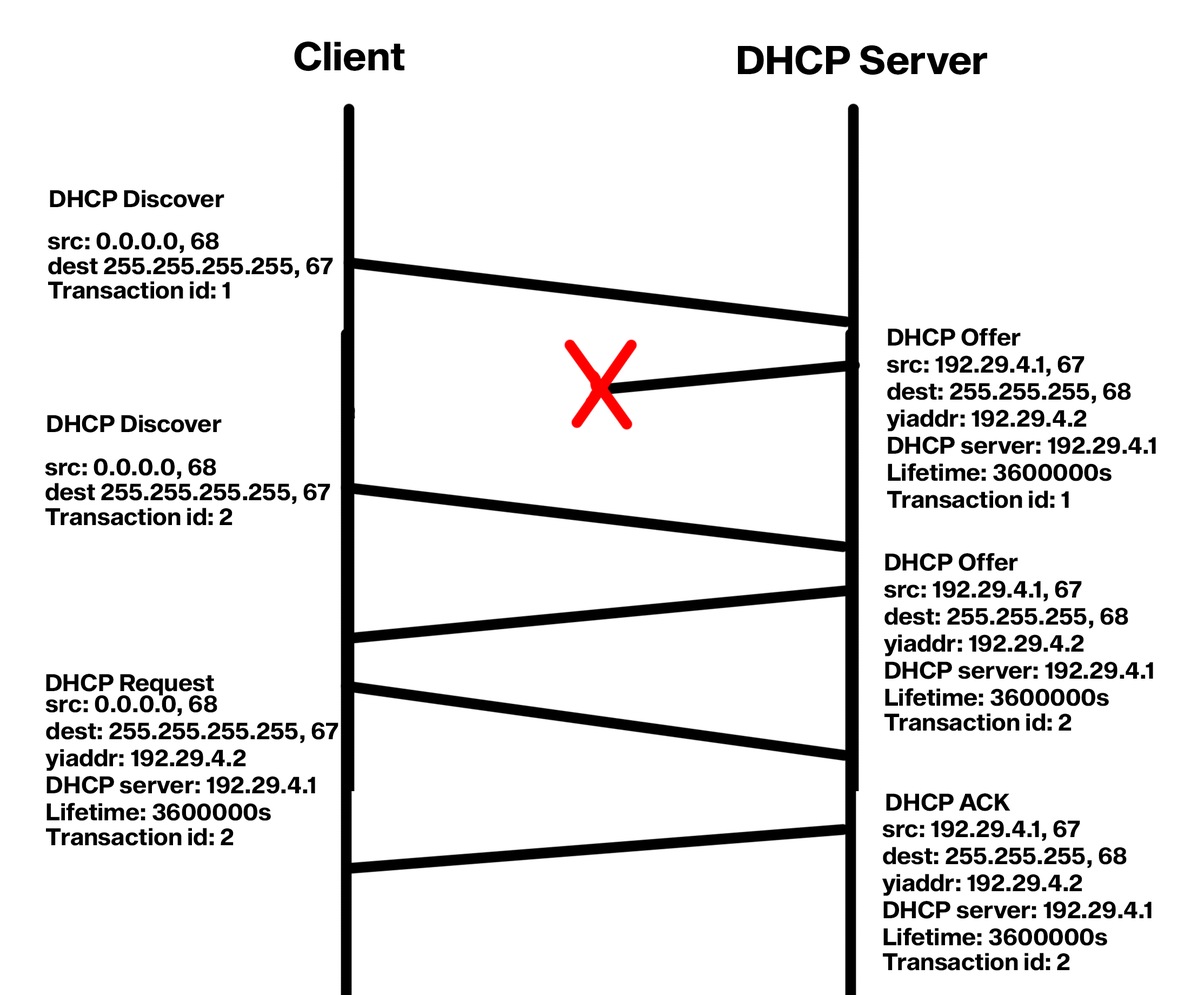
<style>
.page{position:relative;width:1198px;height:995px;background:#ffffff}
.page>*{position:absolute;margin:0}
.t1{font:67.6px "SequelSans-BoldHead";color:#000000}
.t2{font:40.6px "SequelSans-BoldHead";color:#000000}
.t3{font:40.6px/24.8px "SequelSans-BoldHead";color:#000000}
.t4{font:40.6px/27px "SequelSans-BoldHead";color:#000000}
.t5{font:40.6px/22.5px "SequelSans-BoldHead";color:#000000}
</style>
<div class="page">
<p class="t1" style="left:294px;top:41px;width:111px;height:30px">Client</p>
<p class="t1" style="left:738px;top:45px;width:249px;height:30px">DHCP Server</p>
<p class="t2" style="left:50px;top:190px;width:174px;height:18px">DHCP Discover</p>
<p class="t3" style="left:48px;top:232px;width:285px;height:67px">src: 0.0.0.0, 68<br>dest 255.255.255.255, 67<br>Transaction id: 1</p>
<p class="t2" style="left:888px;top:328px;width:133px;height:18px">DHCP Offer</p>
<p class="t4" style="left:887px;top:355px;width:269px;height:153px">src: 192.29.4.1, 67<br>dest: 255.255.255, 68<br>yiaddr: 192.29.4.2<br>DHCP server: 192.29.4.1<br>Lifetime: 3600000s<br>Transaction id: 1</p>
<p class="t2" style="left:47px;top:415px;width:175px;height:18px">DHCP Discover</p>
<p class="t3" style="left:45px;top:458px;width:285px;height:68px">src: 0.0.0.0, 68<br>dest 255.255.255.255, 67<br>Transaction id: 2</p>
<p class="t2" style="left:885px;top:553px;width:133px;height:18px">DHCP Offer</p>
<p class="t4" style="left:884px;top:580px;width:269px;height:151px">src: 192.29.4.1, 67<br>dest: 255.255.255, 68<br>yiaddr: 192.29.4.2<br>DHCP server: 192.29.4.1<br>Lifetime: 3600000s<br><span class="t3">Transaction id: 2</span></p>
<p class="t2" style="left:46px;top:674px;width:168px;height:21px">DHCP Request</p>
<p class="t4" style="left:45px;top:695px;width:294px;height:151px"><span class="t5">src: 0.0.0.0, 68<br>dest: 255.255.255.255</span>, 67<br>yiaddr: 192.29.4.2<br>DHCP server: 192.29.4.1<br>Lifetime: 3600000s<br><span class="t3">Transaction id: 2</span></p>
<p class="t2" style="left:886px;top:793px;width:125px;height:18px">DHCP ACK</p>
<p class="t4" style="left:883px;top:820px;width:269px;height:151px">src: 192.29.4.1, 67<br>dest: 255.255.255, 68<br>yiaddr: 192.29.4.2<br>DHCP server: 192.29.4.1<br>Lifetime: 3600000s<br><span class="t3">Transaction id: 2</span></p>
</div>
